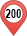
<style>
.page{position:relative;width:27px;height:36px;background:#ffffff}
.page>*{position:absolute;margin:0}
.t1{font:12px "Arial-BoldMT";letter-spacing:0.025em;color:#000000;scale:0.75 1}
</style>
<div class="page">
<p class="t1" style="left:5px;top:9px;width:16px;height:9px">200</p>
</div>
